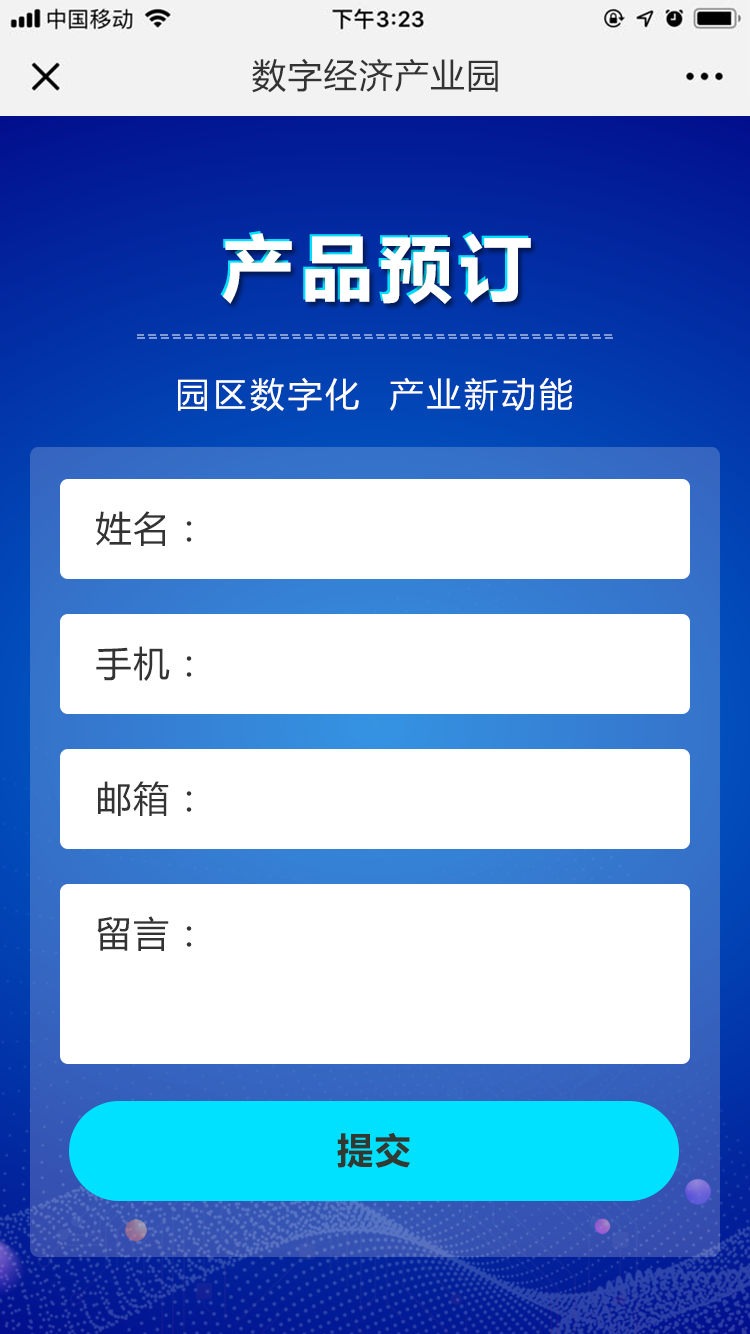
<style>
.page{position:relative;width:750px;height:1334px;background:#ffffff}
.page>*{position:absolute;margin:0}
.t1{font:34px "MicrosoftYaHei";letter-spacing:0.05em;color:#333333}
.t2{font:72px "MicrosoftYaHei-Bold";letter-spacing:0.1em;color:#ffffff}
.t3{font:34px "MicrosoftYaHei";letter-spacing:0.1em;color:#ffffff}
.t4{font:36px "MicrosoftYaHei";letter-spacing:0.05em;color:#333333}
.t5{font:36px "MicrosoftYaHei-Bold";letter-spacing:0.05em;color:#313b33}
</style>
<div class="page">
<p class="t1" style="left:252px;top:58px;width:246px;height:35px">数字经济产业园</p>
<p class="t2" style="left:220px;top:231px;width:309px;height:71px">产品预订</p>
<p class="t2" style="left:222px;top:233px;width:309px;height:71px">产品预订</p>
<p class="t3" style="left:178px;top:377px;width:394px;height:35px">园区数字化  产业新动能</p>
<p class="t4" style="left:96px;top:511px;width:96px;height:35px">姓名：</p>
<p class="t4" style="left:96px;top:646px;width:96px;height:35px">手机：</p>
<p class="t4" style="left:98px;top:781px;width:94px;height:35px">邮箱：</p>
<p class="t4" style="left:97px;top:916px;width:95px;height:35px">留言：</p>
<p class="t5" style="left:337px;top:1132px;width:74px;height:36px">提交</p>
</div>
